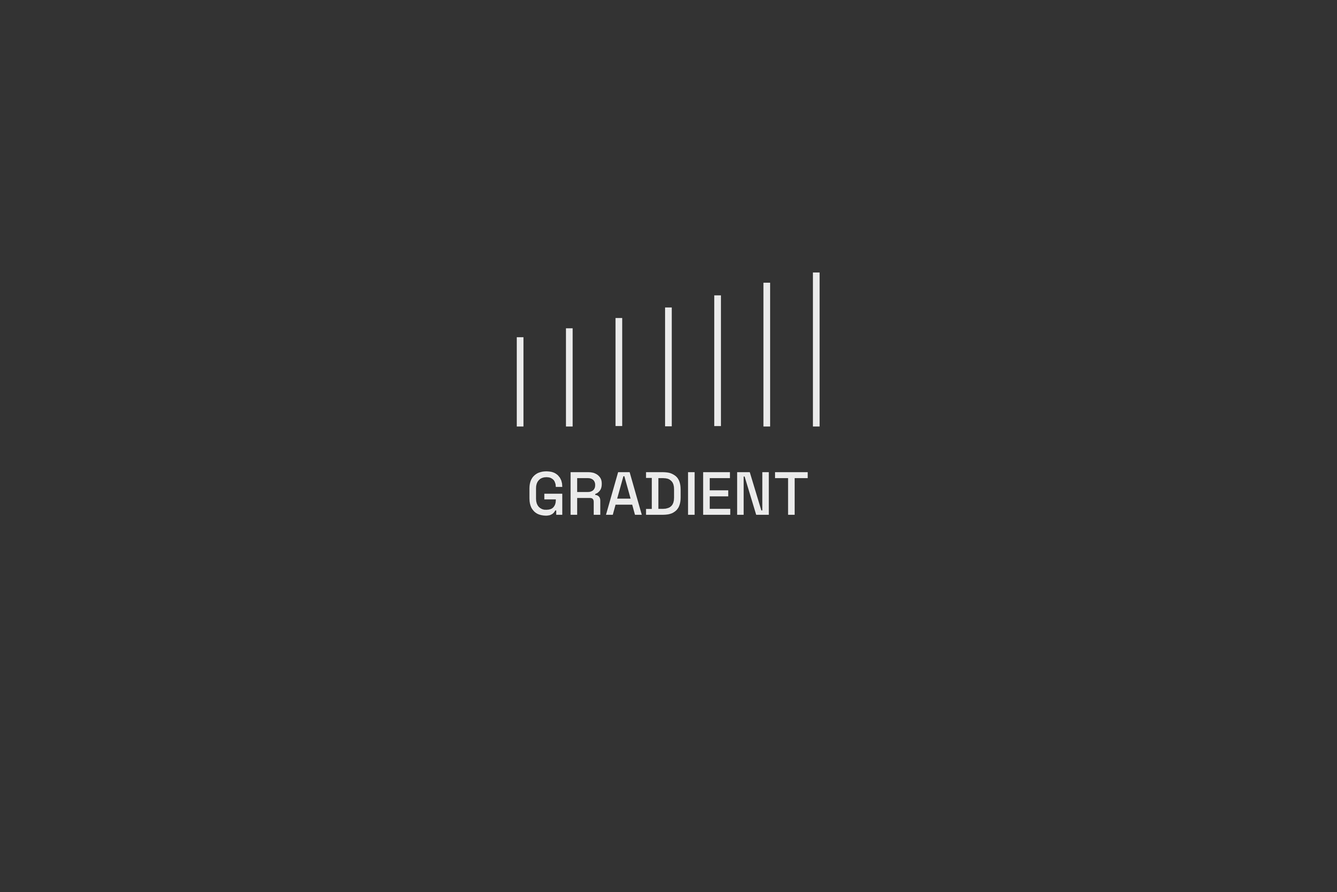
<style>
.page{position:relative;width:1337px;height:892px;background:#333333}
.page>*{position:absolute;margin:0}
.t1{font:60.9px "SpaceGroteskLight-Medium";color:#ebebeb}
</style>
<div class="page">
<p class="t1" style="left:529px;top:471px;width:279px;height:45px">GRADIENT</p>
</div>
